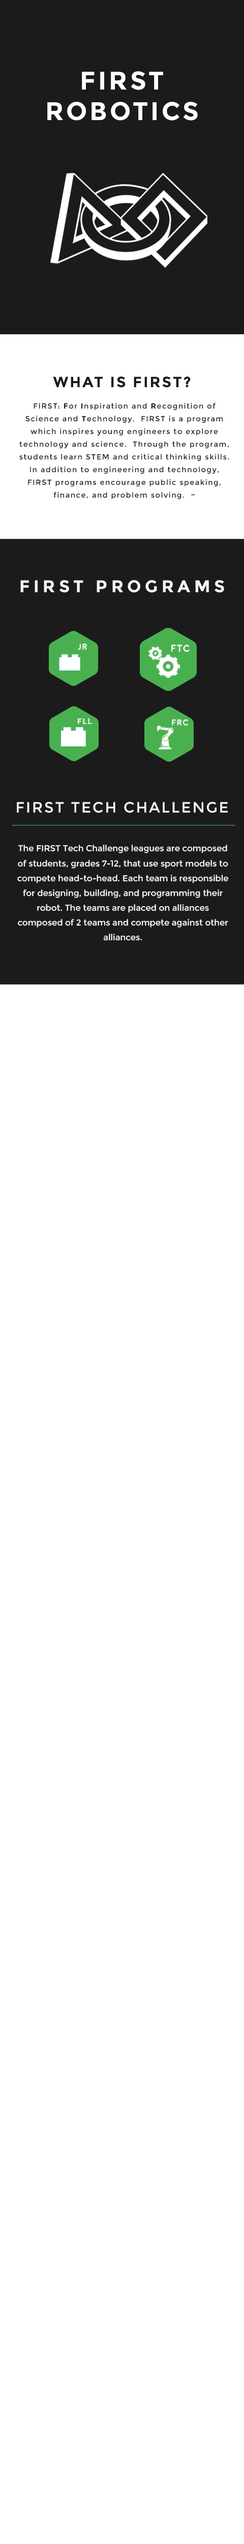
<style>
.page{position:relative;width:244px;height:2544px;background:#ffffff}
.page>*{position:absolute;margin:0}
.t1{font:25.4px "Montserrat-Bold";letter-spacing:0.1em;color:#ffffff}
.t2{font:14.8px "Montserrat-Bold";letter-spacing:0.1em;color:#1b1b1b}
.t3{font:7.4px/12.7px "Montserrat-Regular";letter-spacing:0.1em;color:#1b1b1b}
.t4{font:7.4px/12.7px "Montserrat-Bold";letter-spacing:0.1em;color:#1b1b1b}
.t5{font:17px "Montserrat-Bold";letter-spacing:0.225em;color:#f6f6f6}
.t6{font:8.3px "Moon-Bold";letter-spacing:0.1em;color:#ffffff}
.t7{font:9.5px "Moon-Bold";letter-spacing:0.1em;color:#ffffff}
.t8{font:14.8px "Montserrat-Regular";letter-spacing:0.1em;color:#f6f6f6}
.t9{font:8.5px/14.8px "Montserrat-Regular";color:#f6f6f6}
</style>
<div class="page">
<p class="t1" style="left:47px;top:71px;width:151px;height:50px;text-align:center">FIRST ROBOTICS</p>
<p class="t2" style="left:53px;top:376px;width:138px;height:12px">WHAT IS FIRST?</p>
<p class="t3" style="left:19px;top:402px;width:210px;height:98px;text-align:center">FIRST: <span class="t4">F</span>or <span class="t4">I</span>nspiration and <span class="t4">R</span>ecognition of Science and <span class="t4">T</span>echnology.  FIRST is a program which inspires young engineers to explore technology and science.  Through the program, students learn STEM and critical thinking skills.  In addition to engineering and technology, FIRST programs encourage public speaking, finance, and problem solving.  ~</p>
<p class="t5" style="left:20px;top:580px;width:204px;height:13px">FIRST PROGRAMS</p>
<p class="t6" style="left:78px;top:644px;width:9px;height:6px">JR</p>
<p class="t7" style="left:171px;top:645px;width:19px;height:7px">FTC</p>
<p class="t6" style="left:78px;top:718px;width:14px;height:6px">FLL</p>
<p class="t6" style="left:172px;top:719px;width:16px;height:6px">FRC</p>
<p class="t8" style="left:17px;top:802px;width:211px;height:11px">FIRST TECH CHALLENGE</p>
<p class="t9" style="left:17px;top:844px;width:212px;height:97px;text-align:center">The FIRST Tech Challenge leagues are composed of students, grades 7-12, that use sport models to compete head-to-head. Each team is responsible for designing, building, and programming their robot. The teams are placed on alliances composed of 2 teams and compete against other alliances.</p>
</div>
